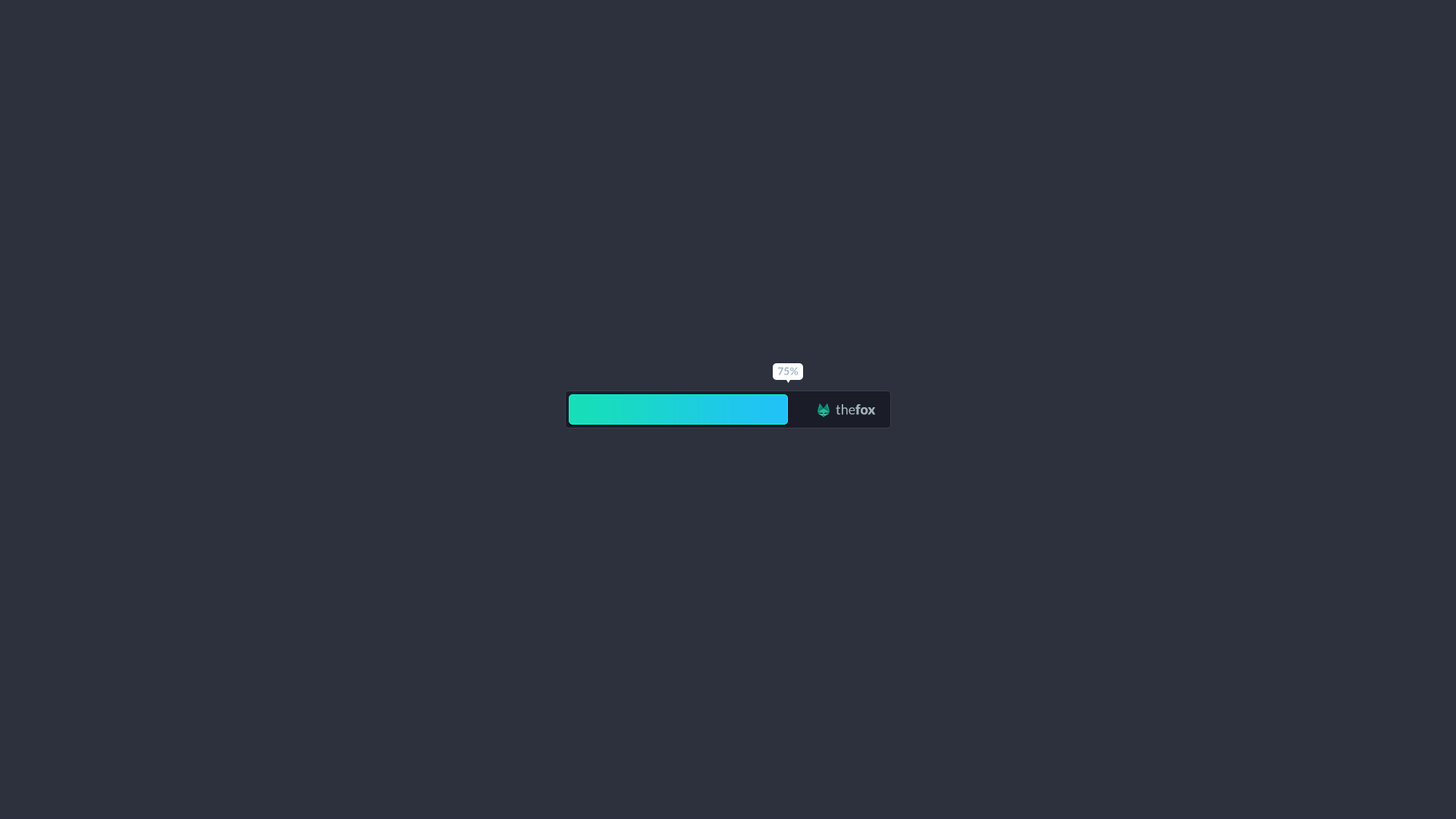
<style>
.page{position:relative;width:1456px;height:819px;background:#2d303d}
.page>*{position:absolute;margin:0}
.t1{font:10.6px "Lato-Bold";color:#a1b1bc}
.t2{font:13.6px "Lato-Regular";color:#a1b1bc}
.t3{font:13.6px "Lato-Black";color:#a1b1bc}
</style>
<div class="page">
<p class="t1" style="left:778px;top:367px;width:21px;height:8px">75%</p>
<p class="t2" style="left:836px;top:404px;width:40px;height:11px">the<span class="t3">fox</span></p>
</div>
